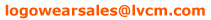
<style>
.page{position:relative;width:211px;height:20px;background:#ffffff}
.page>*{position:absolute;margin:0}
.t1{font:14px "Verdana-Bold";color:#ff5400}
</style>
<div class="page">
<p class="t1" style="left:5px;top:4px;width:200px;height:15px">logowearsales@lvcm.com</p>
</div>
